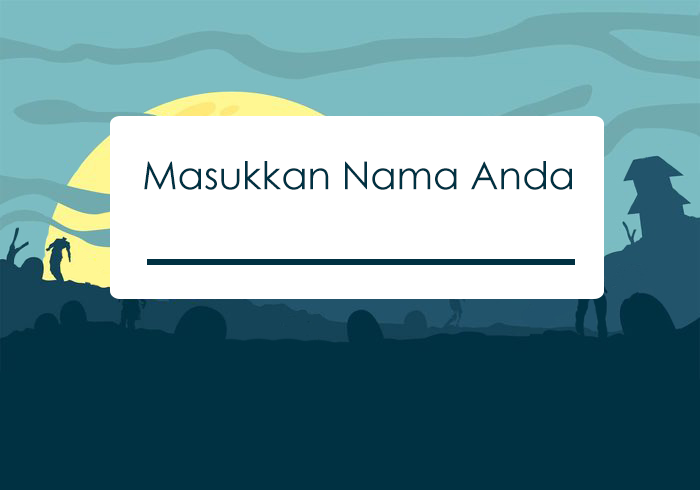
<style>
.page{position:relative;width:700px;height:490px;background:#003142}
.page>*{position:absolute;margin:0}
.t1{font:38.6px "CenturyGothic";color:#003142}
</style>
<div class="page">
<p class="t1" style="left:144px;top:161px;width:428px;height:29px">Masukkan Nama Anda</p>
</div>
